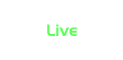
<style>
.page{position:relative;width:123px;height:60px;background:#ffffff}
.page>*{position:absolute;margin:0}
.t1{font:16px "AeroRegularSWFTE";color:#5cff58}
</style>
<div class="page">
<p class="t1" style="left:47px;top:24px;width:30px;height:12px">Live</p>
</div>
